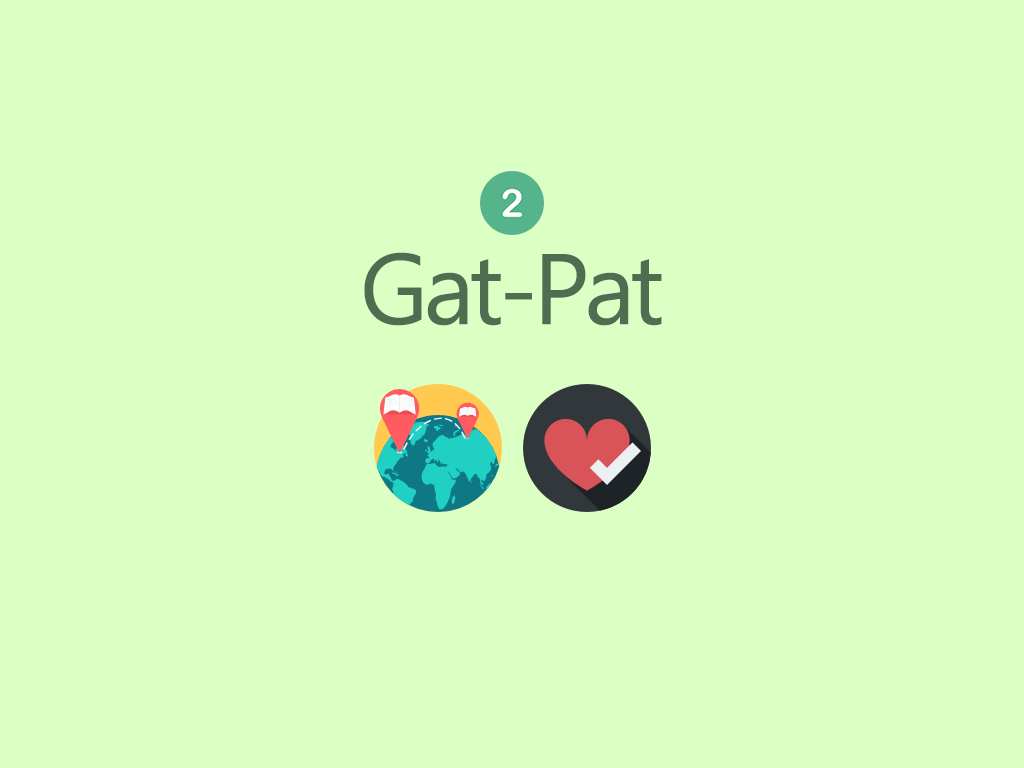
<style>
.page{position:relative;width:1024px;height:768px;background:#dcffc3}
.page>*{position:absolute;margin:0}
.t1{font:100px "MicrosoftTaiLe";letter-spacing:-0.05em;color:#506d52}
</style>
<div class="page">
<p class="t1" style="left:364px;top:252px;width:298px;height:74px">Gat-Pat</p>
</div>
